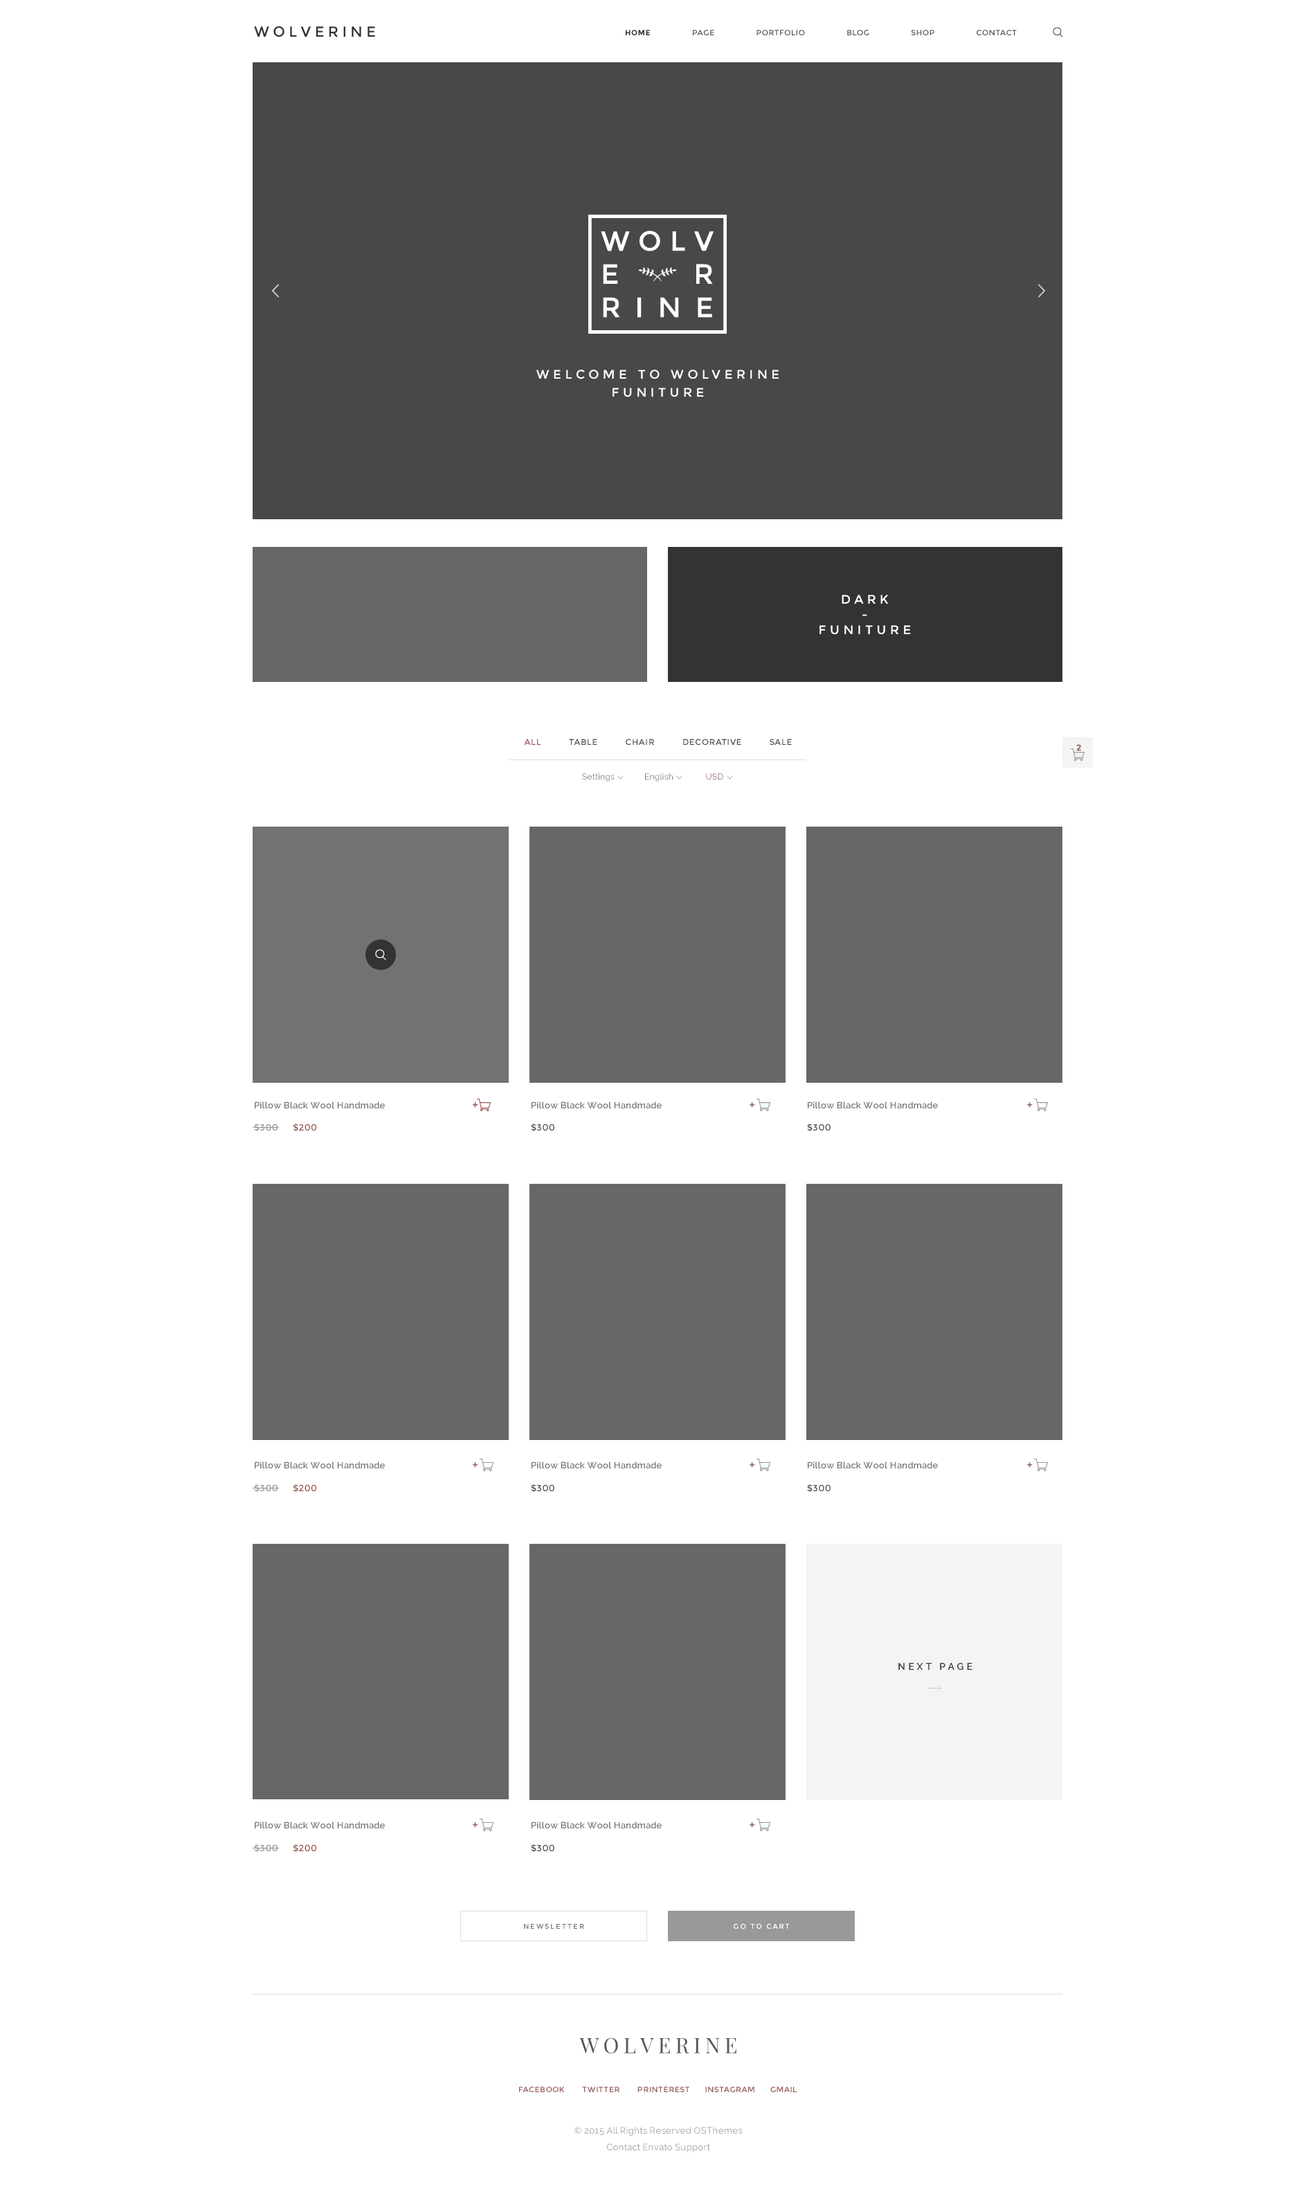
<style>
.page{position:relative;width:1315px;height:2196px;background:#ffffff}
.page>*{position:absolute;margin:0}
.t1{font:14.5px "Montserrat-Regular";color:#333333}
.t2{font:7.6px "Montserrat-Regular";letter-spacing:0.05em;color:#545454}
.t3{font:7.6px "Montserrat-Bold";letter-spacing:0.05em;color:#333333}
.t4{font:12.5px/17.4px "Montserrat-Regular";letter-spacing:0.3em;color:#ffffff}
.t5{font:12.5px/15px "Montserrat-Regular";letter-spacing:0.3em;color:#ffffff}
.t6{font:8.3px "Montserrat-Regular";letter-spacing:0.05em;color:#545454}
.t7{font:8.3px "Montserrat-Regular";letter-spacing:0.05em;color:#995958}
.t8{font:8.3px "Montserrat-Regular";color:#9a5a58;font-weight:bold}
.t9{font:8.3px "Raleway";letter-spacing:0.02em;color:#777777}
.t10{font:8.3px "Raleway";letter-spacing:0.02em;color:#995958}
.t11{font:9px "Raleway-SemiBold";letter-spacing:0.02em;color:#777777}
.t12{font:9.7px "Montserrat-Regular";color:#995958;font-weight:bold}
.t13{font:9px "Montserrat-Regular";letter-spacing:0.02em;color:#999999}
.t14{font:9px "Montserrat-Regular";letter-spacing:0.02em;color:#995958}
.t15{font:9px "Montserrat-Regular";letter-spacing:0.02em;color:#545454}
.t16{font:9.7px "Raleway-SemiBold";letter-spacing:0.3em;color:#333333}
.t17{font:6.9px "Montserrat-Regular";letter-spacing:0.2em;color:#777777}
.t18{font:6.9px "Montserrat-Regular";letter-spacing:0.2em;color:#ffffff}
.t19{font:21.4px "PlayfairDisplay-Regular";letter-spacing:0.1em;color:#555555}
.t20{font:7.6px "Montserrat-Regular";letter-spacing:0.05em;color:#995958}
.t21{font:9px/16.2px "Raleway";letter-spacing:0.02em;color:#999999}
</style>
<div class="page">
<p class="t1" style="left:254px;top:26px;width:121px;height:11px">WOLVERINE</p>
<p class="t2" style="left:626px;top:30px;width:391px;height:5px"><span class="t3">HOME</span>          PAGE          PORTFOLIO          BLOG          SHOP          CONTACT</p>
<p class="t4" style="left:537px;top:370px;width:242px;height:27px;text-align:center">WELCOME TO WOLVERINE FUNITURE</p>
<p class="t5" style="left:820px;top:595px;width:91px;height:40px;text-align:center">DARK<br>-<br>FUNITURE</p>
<p class="t6" style="left:524px;top:739px;width:268px;height:6px"><span class="t7">ALL</span>           TABLE           CHAIR           DECORATIVE           SALE</p>
<p class="t8" style="left:1077px;top:744px;width:4px;height:7px">2</p>
<p class="t9" style="left:582px;top:773px;width:141px;height:9px">Settings            English             <span class="t10">USD</span></p>
<p class="t11" style="left:255px;top:1101px;width:130px;height:8px">Pillow Black Wool Handmade</p>
<p class="t11" style="left:532px;top:1101px;width:130px;height:8px">Pillow Black Wool Handmade</p>
<p class="t12" style="left:750px;top:1102px;width:5px;height:6px">+</p>
<p class="t11" style="left:808px;top:1101px;width:130px;height:8px">Pillow Black Wool Handmade</p>
<p class="t12" style="left:1027px;top:1102px;width:6px;height:6px">+</p>
<p class="t13" style="left:254px;top:1124px;width:63px;height:7px">$300     <span class="t14">$200</span></p>
<p class="t15" style="left:531px;top:1124px;width:24px;height:7px">$300</p>
<p class="t15" style="left:807px;top:1124px;width:24px;height:7px">$300</p>
<p class="t11" style="left:255px;top:1461px;width:130px;height:8px">Pillow Black Wool Handmade</p>
<p class="t12" style="left:473px;top:1462px;width:5px;height:6px">+</p>
<p class="t11" style="left:532px;top:1461px;width:130px;height:8px">Pillow Black Wool Handmade</p>
<p class="t12" style="left:750px;top:1462px;width:5px;height:6px">+</p>
<p class="t11" style="left:808px;top:1461px;width:130px;height:8px">Pillow Black Wool Handmade</p>
<p class="t12" style="left:1027px;top:1462px;width:6px;height:6px">+</p>
<p class="t13" style="left:254px;top:1484px;width:63px;height:8px">$300     <span class="t14">$200</span></p>
<p class="t15" style="left:531px;top:1484px;width:24px;height:8px">$300</p>
<p class="t15" style="left:807px;top:1484px;width:24px;height:8px">$300</p>
<p class="t16" style="left:899px;top:1663px;width:74px;height:7px">NEXT PAGE</p>
<p class="t11" style="left:255px;top:1821px;width:130px;height:8px">Pillow Black Wool Handmade</p>
<p class="t12" style="left:473px;top:1822px;width:5px;height:6px">+</p>
<p class="t11" style="left:532px;top:1821px;width:130px;height:8px">Pillow Black Wool Handmade</p>
<p class="t12" style="left:750px;top:1822px;width:5px;height:6px">+</p>
<p class="t13" style="left:254px;top:1844px;width:63px;height:8px">$300     <span class="t14">$200</span></p>
<p class="t15" style="left:531px;top:1844px;width:24px;height:8px">$300</p>
<p class="t17" style="left:524px;top:1923px;width:60px;height:6px">NEWSLETTER</p>
<p class="t18" style="left:734px;top:1923px;width:56px;height:6px">GO TO CART</p>
<p class="t19" style="left:579px;top:2037px;width:158px;height:16px">WOLVERINE</p>
<p class="t20" style="left:519px;top:2087px;width:278px;height:5px">FACEBOOK       TWITTER       PRINTEREST      INSTAGRAM      GMAIL</p>
<p class="t21" style="left:575px;top:2127px;width:168px;height:25px;text-align:center">© 2015 All Rights Reserved OSThemes<br>Contact Envato Support</p>
</div>
